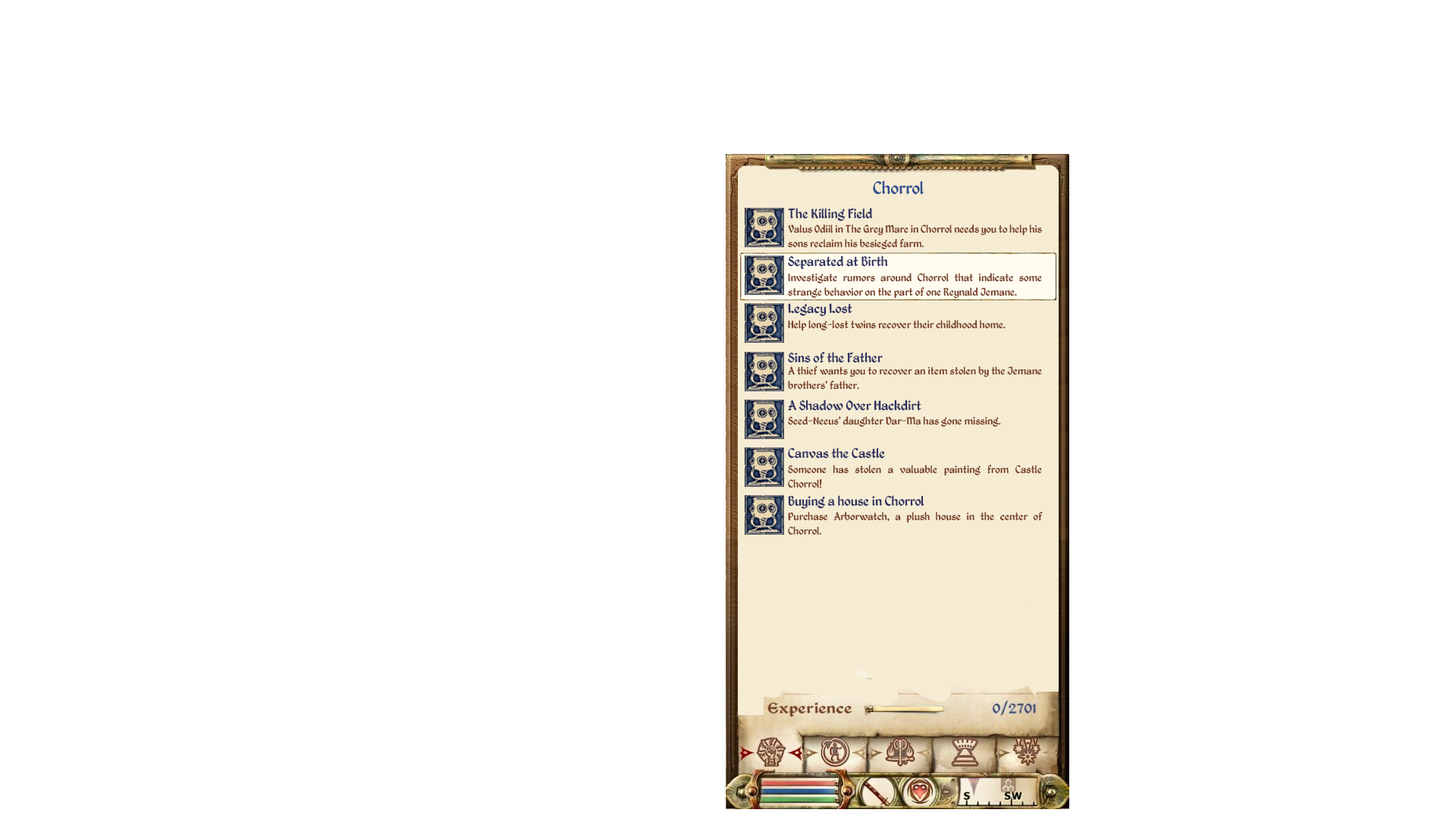
<style>
.page{position:relative;width:1456px;height:819px;background:#ffffff}
.page>*{position:absolute;margin:0}
.t1{font:19.7px "KingthingsPetrock";color:#34508e}
.t2{font:15.2px "KingthingsPetrock";color:#303261}
.t3{font:12.1px "KingthingsPetrock";color:#783f25}
</style>
<div class="page">
<p class="t1" style="left:873px;top:180px;width:51px;height:15px">Chorrol</p>
<p class="t2" style="left:788px;top:208px;width:85px;height:13px">The Killing Field</p>
<p class="t3" style="left:788px;top:224px;width:254px;height:25px;text-align:justify">Valus Odiil in The Grey Mare in Chorrol needs you to help his sons reclaim his besieged farm.</p>
<p class="t2" style="left:788px;top:256px;width:100px;height:13px">Separated at Birth</p>
<p class="t3" style="left:788px;top:273px;width:254px;height:26px;text-align:justify">Investigate rumors around Chorrol that indicate some strange behavior on the part of one Reynald Jemane.</p>
<p class="t2" style="left:788px;top:303px;width:64px;height:13px">Legacy Lost</p>
<p class="t3" style="left:788px;top:320px;width:218px;height:11px">Help long-lost twins recover their childhood home.</p>
<p class="t2" style="left:788px;top:352px;width:95px;height:11px">Sins of the Father</p>
<p class="t3" style="left:788px;top:366px;width:254px;height:24px;text-align:justify">A thief wants you to recover an item stolen by the Jemane brothers' father.</p>
<p class="t2" style="left:788px;top:400px;width:133px;height:11px">A Shadow Over Hackdirt</p>
<p class="t3" style="left:788px;top:416px;width:213px;height:11px">Seed-Neeus' daughter Dar-Ma has gone missing.</p>
<p class="t2" style="left:788px;top:447px;width:97px;height:12px">Canvas the Castle</p>
<p class="t3" style="left:788px;top:465px;width:254px;height:23px;text-align:justify">Someone has stolen a valuable painting from Castle Chorrol!</p>
<p class="t2" style="left:788px;top:495px;width:136px;height:14px">Buying a house in Chorrol</p>
<p class="t3" style="left:788px;top:511px;width:255px;height:24px;text-align:justify">Purchase Arborwatch, a plush house in the center of Chorrol.</p>
</div>
